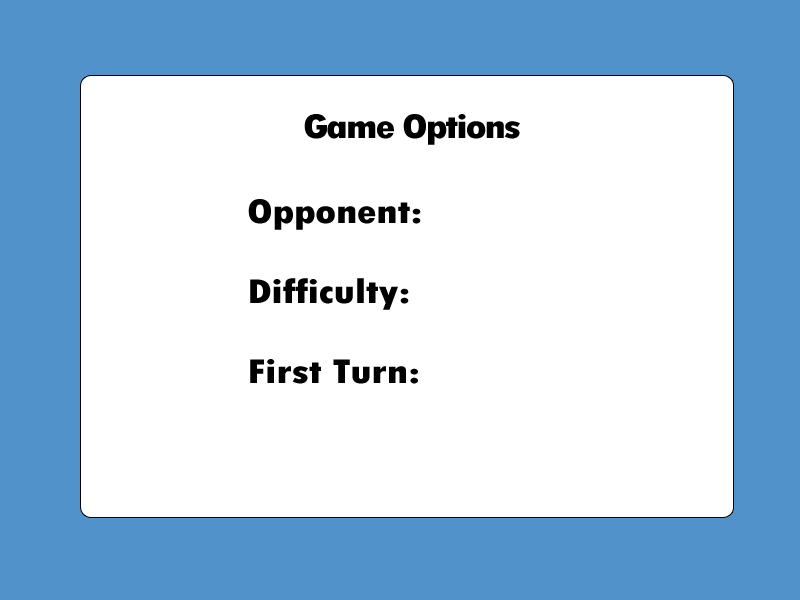
<style>
.page{position:relative;width:800px;height:600px;background:#ffffff}
.page>*{position:absolute;margin:0}
.t1{font:36px "TwCenMT-CondensedExtraBold";letter-spacing:-0.05em;color:#000000;scale:1.28 1}
.t2{font:36px/40px "TwCenMT-CondensedExtraBold";letter-spacing:-0.01em;color:#000000;scale:1.28 1}
</style>
<div class="page">
<p class="t1" style="left:304px;top:114px;width:216px;height:31px">Game Options</p>
<p class="t2" style="left:248px;top:199px;width:173px;height:185px">Opponent: <br><br>Difficulty: <br><br>First Turn:</p>
</div>
